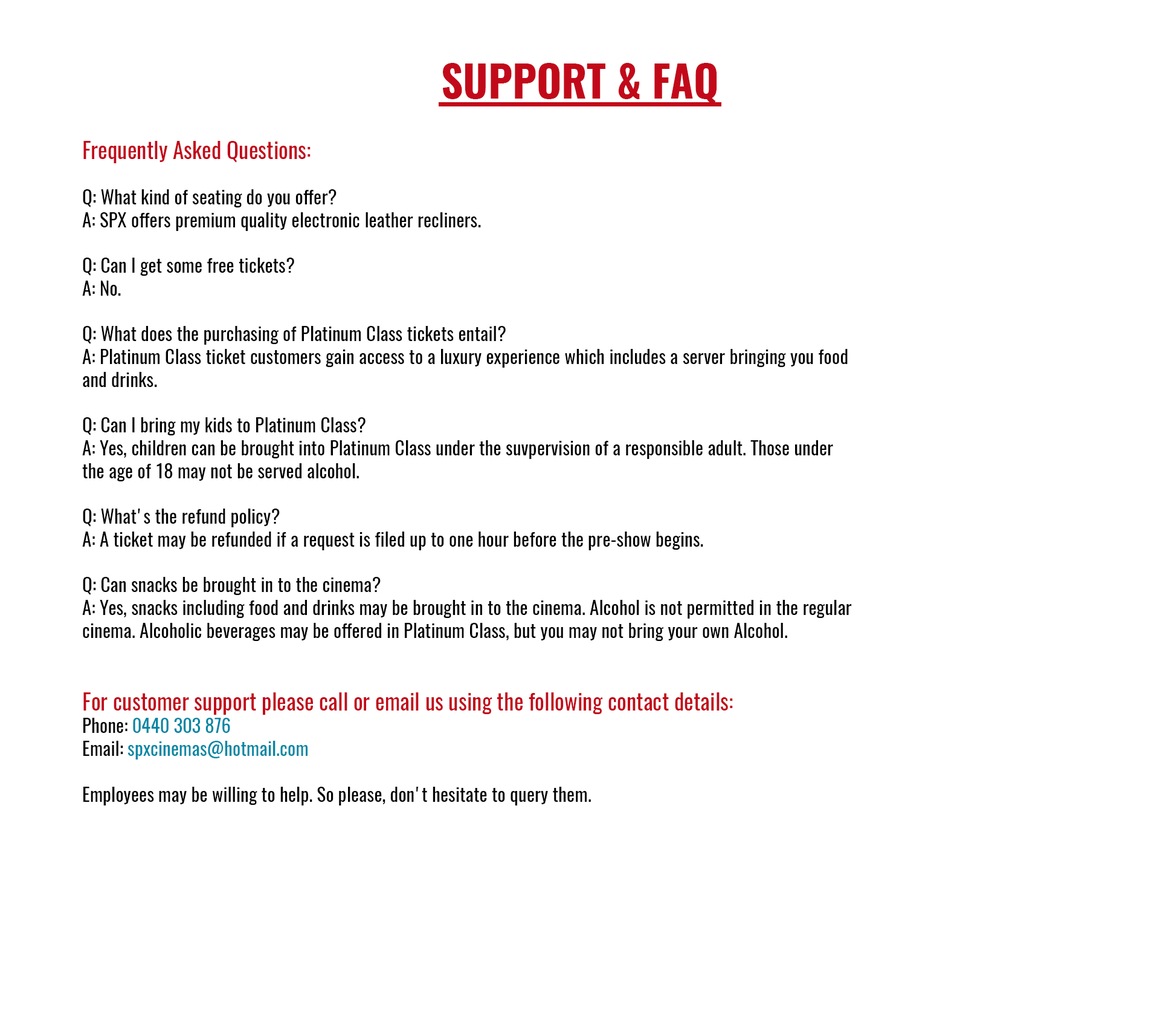
<style>
.page{position:relative;width:1160px;height:1028px;background:#ffffff}
.page>*{position:absolute;margin:0}
.t1{font:42.7px "Oswald-Bold";color:#c2091a}
.t2{font:19px "Oswald-Regular";color:#000000}
.t3{font:22.6px "Oswald-Regular";color:#c2091a}
.t4{font:19px "Oswald-Regular";color:#0087a4}
</style>
<div class="page">
<p class="t1" style="left:443px;top:63px;width:274px;height:43px">SUPPORT &amp; FAQ</p>
<p class="t2" style="left:82px;top:141px;width:770px;height:664px"><span class="t3">Frequently Asked Questions:<br></span><br>Q: What kind of seating do you offer?<br>A: SPX offers premium quality electronic leather recliners.<br> <br>Q: Can I get some free tickets?<br>A: No.<br><br>Q: What does the purchasing of Platinum Class tickets entail?<br>A: Platinum Class ticket customers gain access to a luxury experience which includes a server bringing you food and drinks.<br><br>Q: Can I bring my kids to Platinum Class?<br>A: Yes, children can be brought into Platinum Class under the suvpervision of a responsible adult. Those under the age of 18 may not be served alcohol.<br> <br>Q: What's the refund policy?<br>A: A ticket may be refunded if a request is filed up to one hour before the pre-show begins.<br> <br>Q: Can snacks be brought in to the cinema?<br>A: Yes, snacks including food and drinks may be brought in to the cinema. Alcohol is not permitted in the regular cinema. Alcoholic beverages may be offered in Platinum Class, but you may not bring your own Alcohol.<br><br><br><span class="t3">For customer support please call or email us using the following contact details:<br></span>Phone: <span class="t4">0440 303 876<br></span>Email: <span class="t4">spxcinemas@hotmail.com<br></span><br>Employees may be willing to help. So please, don't hesitate to query them.</p>
</div>
